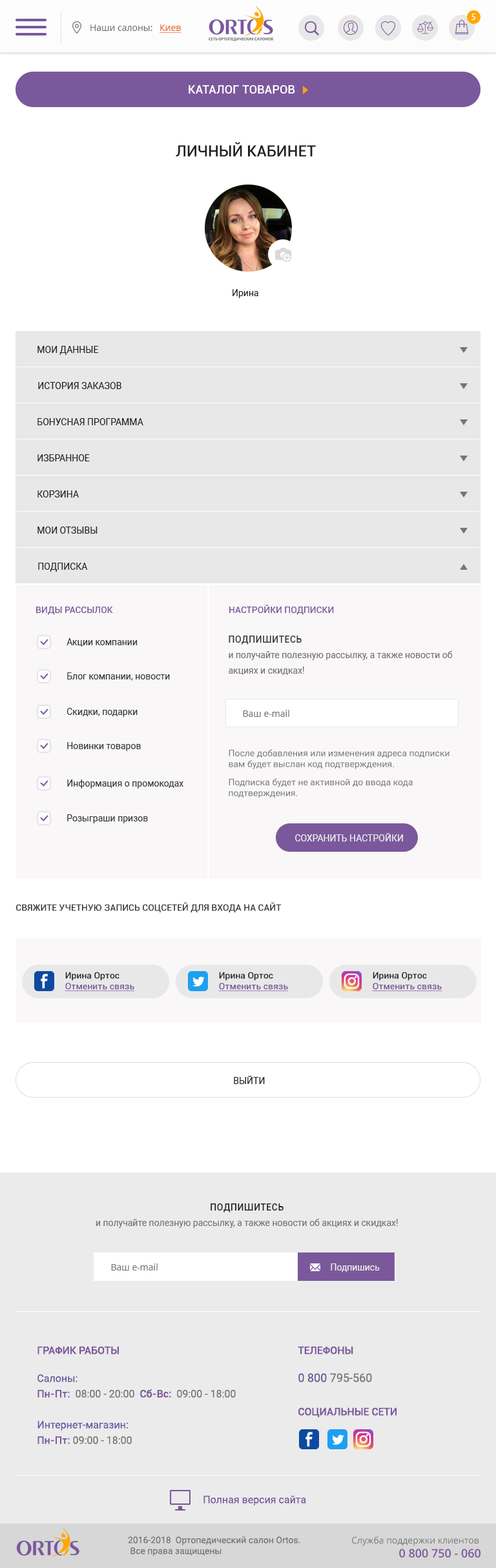
<style>
.page{position:relative;width:496px;height:1568px;background:#ffffff}
.page>*{position:absolute;margin:0}
.t1{font:9px "MyriadPro-Regular";letter-spacing:0.1em;color:#ffffff;text-transform:uppercase}
.t2{font:9px "OpenSans";color:#757575}
.t3{font:9px "OpenSans";color:#f26022;text-decoration:underline}
.t4{font:11.6px "Roboto-Medium";letter-spacing:0.01em;color:#ffffff;text-transform:uppercase}
.t5{font:15.5px "Roboto-Medium";color:#212121;text-transform:uppercase}
.t6{font:9px "Roboto-Regular";color:#212121}
.t7{font:9px "Roboto-Regular";color:#212121;text-transform:uppercase}
.t8{font:9px "Roboto-Medium";color:#7b589c;text-transform:uppercase}
.t9{font:9px "Roboto-Regular";color:#34373d}
.t10{font:9px/15.5px "Roboto-Regular";color:#757575}
.t11{font:9px "Roboto-Medium";letter-spacing:0.05em;color:#34373d;text-transform:uppercase}
.t12{font:9px "Roboto-Regular";color:#757575}
.t13{font:9px "Roboto-Regular";color:#ebebeb;text-transform:uppercase}
.t14{font:9px "Roboto-Medium";color:#34373d;text-transform:uppercase}
.t15{font:9px "Roboto-Medium";color:#7b589c;text-decoration:underline}
.t16{font:9px "Roboto-Medium";color:#212121}
.t17{font:9px "Roboto-Medium";letter-spacing:0.05em;color:#212121;text-transform:uppercase}
.t18{font:9px "Roboto-Regular";color:#ebebeb}
.t19{font:10.3px/15.5px "Roboto-Regular";color:#6758a2}
.t20{font:10.3px "Roboto-Medium";color:#7b589c;text-transform:uppercase}
.t21{font:10.3px/15.5px "Roboto-Medium";color:#7b589c}
.t22{font:10.3px/15.5px "Roboto-Regular";color:#757575}
.t23{font:11.6px/15.5px "Roboto-Regular";color:#68579a}
.t24{font:11.6px/15.5px "Roboto-Regular";color:#757575}
.t25{font:10.3px "Roboto-Regular";color:#7b589c}
.t26{font:11.6px "OpenSans-Semibold";color:#7b589c}
</style>
<div class="page">
<p class="t1" style="left:471px;top:14px;width:4px;height:6px">5</p>
<p class="t2" style="left:90px;top:25px;width:91px;height:8px">Наши салоны: <span class="t3">Киев</span></p>
<p class="t4" style="left:188px;top:85px;width:107px;height:9px">Каталог товаров</p>
<p class="t5" style="left:176px;top:142px;width:140px;height:15px">Личный кабинет</p>
<p class="t6" style="left:232px;top:289px;width:26px;height:9px">Ирина</p>
<p class="t7" style="left:37px;top:346px;width:62px;height:9px">Мои данные</p>
<p class="t7" style="left:38px;top:382px;width:83px;height:7px">История заказов</p>
<p class="t7" style="left:37px;top:418px;width:106px;height:7px">Бонусная программа</p>
<p class="t7" style="left:37px;top:454px;width:53px;height:7px">Избранное</p>
<p class="t7" style="left:37px;top:490px;width:42px;height:8px">Корзина</p>
<p class="t7" style="left:37px;top:527px;width:60px;height:7px">Мои отзывы</p>
<p class="t7" style="left:38px;top:563px;width:50px;height:9px">Подписка</p>
<p class="t8" style="left:229px;top:605px;width:105px;height:10px">Настройки подписки</p>
<p class="t8" style="left:36px;top:607px;width:77px;height:8px">Виды рассылок</p>
<p class="t9" style="left:66px;top:638px;width:71px;height:9px">Акции компании</p>
<p class="t10" style="left:228px;top:636px;width:224px;height:39px"><span class="t11">Подпишитесь <br></span>и получайте полезную рассылку, а также новости об акциях и скидках!</p>
<p class="t9" style="left:67px;top:672px;width:103px;height:9px">Блог компании, новости</p>
<p class="t9" style="left:66px;top:708px;width:71px;height:9px">Скидки, подарки</p>
<p class="t2" style="left:243px;top:710px;width:46px;height:7px">Ваш e-mail</p>
<p class="t9" style="left:67px;top:742px;width:74px;height:9px">Новинки товаров</p>
<p class="t12" style="left:228px;top:749px;width:221px;height:20px">После добавления или изменения адреса подписки вам будет выслан код подтверждения.</p>
<p class="t9" style="left:67px;top:779px;width:116px;height:10px">Информация о промокодах</p>
<p class="t12" style="left:228px;top:778px;width:184px;height:20px">Подписка будет не активной до ввода кода подтверждения.</p>
<p class="t9" style="left:67px;top:814px;width:81px;height:9px">Розыграши призов</p>
<p class="t13" style="left:295px;top:833px;width:108px;height:8px">Сохранить настройки</p>
<p class="t14" style="left:16px;top:902px;width:265px;height:10px">Свяжите учетную запись соцсетей для входа на сайт</p>
<p class="t15" style="left:65px;top:972px;width:70px;height:19px"><span class="t16">Ирина Ортос<br></span>Отменить связь</p>
<p class="t15" style="left:218px;top:972px;width:70px;height:19px"><span class="t16">Ирина Ортос<br></span>Отменить связь</p>
<p class="t15" style="left:372px;top:972px;width:70px;height:19px"><span class="t16">Ирина Ортос<br></span>Отменить связь</p>
<p class="t7" style="left:234px;top:1076px;width:31px;height:8px">Выйти</p>
<p class="t10" style="left:95px;top:1203px;width:302px;height:25px;text-align:center"><span class="t17">Подпишитесь <br></span>и получайте полезную рассылку, а также новости об акциях и скидках!</p>
<p class="t2" style="left:111px;top:1263px;width:46px;height:8px">Ваш e-mail</p>
<p class="t18" style="left:330px;top:1263px;width:49px;height:9px">Подпишись</p>
<p class="t19" style="left:37px;top:1346px;width:199px;height:98px"><span class="t20">График работы<br><br></span>Салоны: <br><span class="t21">Пн-Пт:</span><span class="t22">  08:00 - 20:00  </span><span class="t21">Сб-Вс:</span><span class="t22">  09:00 - 18:00<br><br></span>Интернет-магазин:<br><span class="t21">Пн-Пт:</span><span class="t22"> 09:00 - 18:00</span></p>
<p class="t20" style="left:297px;top:1346px;width:75px;height:36px">Телефоны<br><br><span class="t23">0 800 </span><span class="t24">795-560</span></p>
<p class="t20" style="left:298px;top:1407px;width:98px;height:11px">Социальные сети</p>
<p class="t25" style="left:203px;top:1495px;width:103px;height:10px">Полная версия сайта</p>
<p class="t12" style="left:128px;top:1536px;width:172px;height:20px">2016-2018  Ортопедический салон Ortos.<br> Все права защищены</p>
<p class="t2" style="left:352px;top:1536px;width:128px;height:22px;text-align:right">Служба поддержки клиентов <br> <span class="t26">0 800 750 - 060</span></p>
</div>
